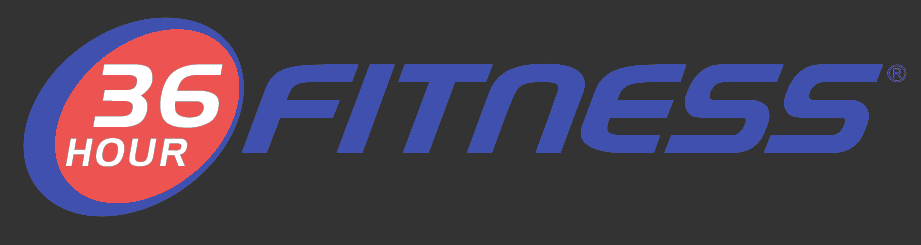
<style>
.page{position:relative;width:921px;height:245px;background:#333333}
.page>*{position:absolute;margin:0}
.t1{font:87.5px "HandelGothic";letter-spacing:0.06em;color:#ffffff;font-style:italic}
.t2{font:38.3px "HandelGothic";letter-spacing:0.06em;color:#ffffff;font-style:italic}
</style>
<div class="page">
<p class="t1" style="left:93px;top:64px;width:130px;height:64px">36</p>
<p class="t2" style="left:65px;top:138px;width:123px;height:29px">HOUR</p>
</div>
